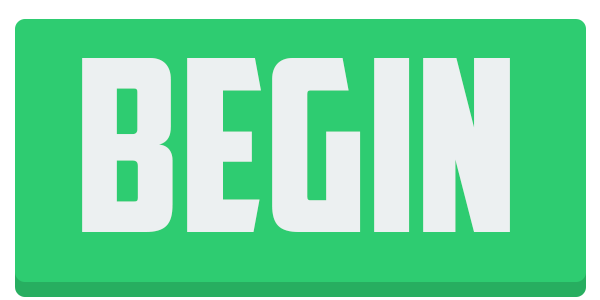
<style>
.page{position:relative;width:600px;height:300px;background:#2ecc71}
.page>*{position:absolute;margin:0}
.t1{font:240px "AmericanCaptain";color:#ecf0f1}
</style>
<div class="page">
<p class="t1" style="left:82px;top:58px;width:428px;height:174px">BEGIN</p>
</div>
